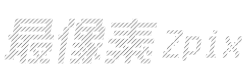
<style>
.page{position:relative;width:250px;height:80px;background:#ffffff}
.page>*{position:absolute;margin:0}
.t1{font:36px "Zpix";letter-spacing:-0.075em;font-weight:bold;font-style:italic}
.t2{font:48px "Zpix";letter-spacing:-0.075em;font-weight:bold;font-style:italic}
</style>
<div class="page">
<p class="t1" style="left:4px;top:18px;width:239px;height:46px"><span class="t2">最像素</span>Zpix</p>
</div>
